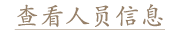
<style>
.page{position:relative;width:170px;height:30px;background:#ffffff}
.page>*{position:absolute;margin:0}
.t1{font:25px "AdobeKaitiStd-Regular";color:#978169;text-decoration:underline}
</style>
<div class="page">
<p class="t1" style="left:14px;top:4px;width:151px;height:27px">查看人员信息</p>
</div>
